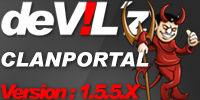
<style>
.page{position:relative;width:200px;height:100px}
.page>*{position:absolute;margin:0}
.t1{font:45.5px "Arial-BlackItalic";letter-spacing:-0.12em;color:#ffffff}
.t2{font:45.5px "Arial-BlackItalic";letter-spacing:-0.12em;color:#ff0000}
.t3{font:20px "Arial-BlackItalic";color:#ffffff;text-transform:uppercase}
.t4{font:20px "Arial-BlackItalic";letter-spacing:-0.12em;color:#ff0000}
</style>
<div class="page">
<p class="t1" style="left:1px;top:1px;width:149px;height:35px">deV<span class="t2">!</span>L´z</p>
<p class="t3" style="left:1px;top:52px;width:148px;height:15px">ClanPortal</p>
<p class="t4" style="left:1px;top:84px;width:140px;height:15px">Version : 1.5.5.X</p>
</div>
